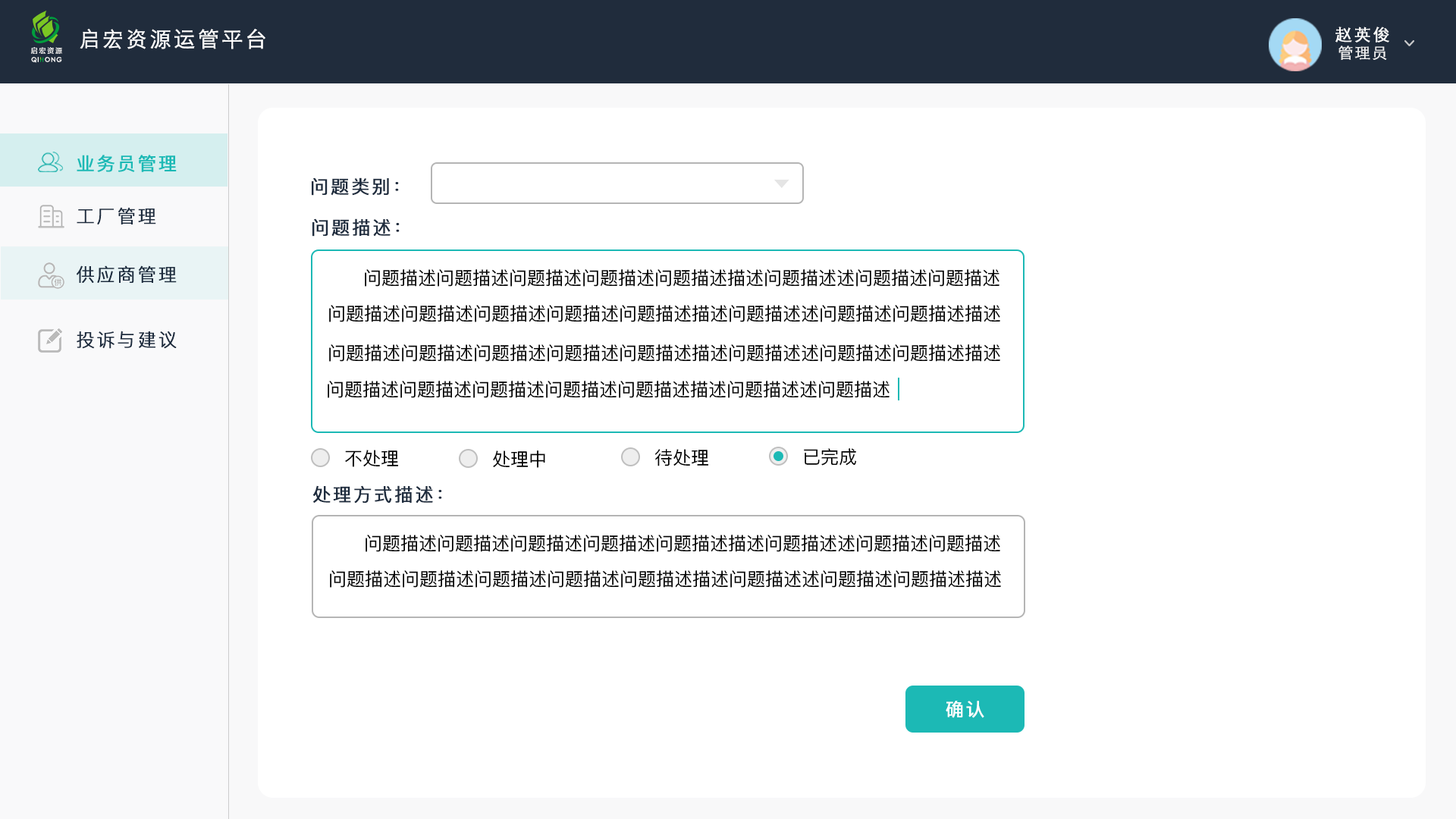
<style>
.page{position:relative;width:1456px;height:819px;background:#ffffff}
.page>*{position:absolute;margin:0}
.t1{font:21.2px "STHeitiSC-Light";letter-spacing:0.1em;color:#ffffff;font-weight:bold}
.t2{font:16.7px "STHeitiSC-Light";letter-spacing:0.1em;color:#ffffff;font-weight:bold}
.t3{font:7px "FZLTZHK--GBK1-0";letter-spacing:0.18em;color:#ffffff}
.t4{font:15.2px "STHeitiSC-Light";letter-spacing:0.1em;color:#ffffff;font-weight:bold}
.t5{font:6.3px "CenturyGothic";letter-spacing:0.1em;color:#ffffff;font-weight:bold}
.t6{font:18.2px "PingFangSC-Regular";letter-spacing:0.1em;color:#1cb9b5;font-weight:bold}
.t7{font:18.2px "PingFangSC-Regular";letter-spacing:0.1em;color:#1e2c3e;font-weight:bold}
.t8{font:18.2px "PingFangSC-Light";letter-spacing:0.1em;color:#1e2c3e;font-weight:bold}
.t9{font:18.2px "PingFangSC-Regular";color:#000000}
.t10{font:18.2px "PingFangSC-Regular";letter-spacing:0.1em;color:#ffffff;font-weight:bold}
</style>
<div class="page">
<p class="t1" style="left:80px;top:29px;width:185px;height:20px">启宏资源运管平台</p>
<p class="t2" style="left:1335px;top:27px;width:54px;height:15px">赵英俊</p>
<p class="t3" style="left:31px;top:47px;width:31px;height:7px">启宏资源</p>
<p class="t4" style="left:1338px;top:45px;width:49px;height:15px;opacity:0.9">管理员</p>
<p class="t5" style="left:31px;top:57px;width:31px;height:6px">QI  ONG</p>
<p class="t6" style="left:77px;top:155px;width:100px;height:17px">业务员管理</p>
<p class="t7" style="left:312px;top:177px;width:87px;height:19px">问题类别：</p>
<p class="t8" style="left:77px;top:207px;width:79px;height:17px">工厂管理</p>
<p class="t7" style="left:312px;top:218px;width:88px;height:19px">问题描述：</p>
<p class="t8" style="left:77px;top:265px;width:100px;height:18px">供应商管理</p>
<p class="t9" style="left:365px;top:269px;width:634px;height:18px">问题描述问题描述问题描述问题描述问题描述描述问题描述述问题描述问题描述</p>
<p class="t9" style="left:329px;top:305px;width:671px;height:17px">问题描述问题描述问题描述问题描述问题描述描述问题描述述问题描述问题描述描述</p>
<p class="t8" style="left:77px;top:331px;width:100px;height:18px">投诉与建议</p>
<p class="t9" style="left:329px;top:344px;width:671px;height:18px">问题描述问题描述问题描述问题描述问题描述描述问题描述述问题描述问题描述描述</p>
<p class="t9" style="left:328px;top:381px;width:562px;height:17px">问题描述问题描述问题描述问题描述问题描述描述问题描述述问题描述</p>
<p class="t9" style="left:345px;top:450px;width:53px;height:17px">不处理</p>
<p class="t9" style="left:655px;top:449px;width:53px;height:17px">待处理</p>
<p class="t9" style="left:804px;top:448px;width:52px;height:18px">已完成</p>
<p class="t9" style="left:493px;top:450px;width:52px;height:18px">处理中</p>
<p class="t7" style="left:313px;top:485px;width:129px;height:19px">处理方式描述：</p>
<p class="t9" style="left:366px;top:535px;width:634px;height:17px">问题描述问题描述问题描述问题描述问题描述描述问题描述述问题描述问题描述</p>
<p class="t9" style="left:330px;top:570px;width:671px;height:18px">问题描述问题描述问题描述问题描述问题描述描述问题描述述问题描述问题描述描述</p>
<p class="t10" style="left:946px;top:701px;width:38px;height:17px">确认</p>
</div>
